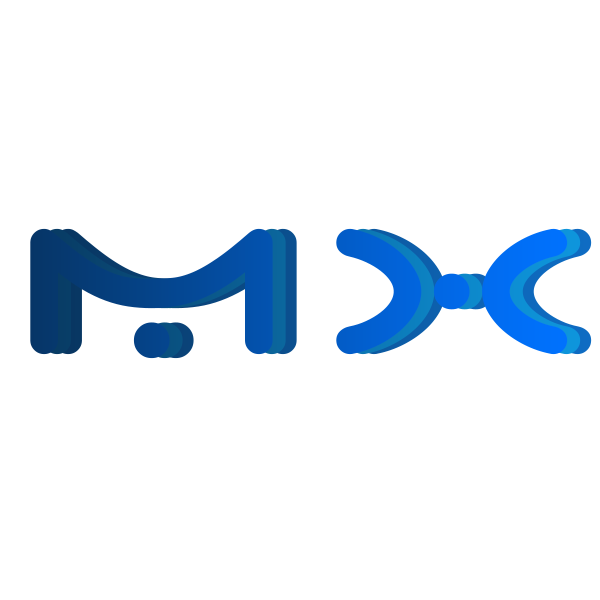
<style>
.page{position:relative;width:600px;height:600px;background:#ffffff}
.page>*{position:absolute;margin:0}
.t1{font:287.2px "SpaceAgeRUSBYLYAJKA";letter-spacing:0.12em}
</style>
<div class="page">
<p class="t1" style="left:30px;top:228px;width:538px;height:131px">MX</p>
<p class="t1" style="left:43px;top:228px;width:538px;height:131px">MX</p>
<p class="t1" style="left:54px;top:228px;width:538px;height:131px">MX</p>
</div>
